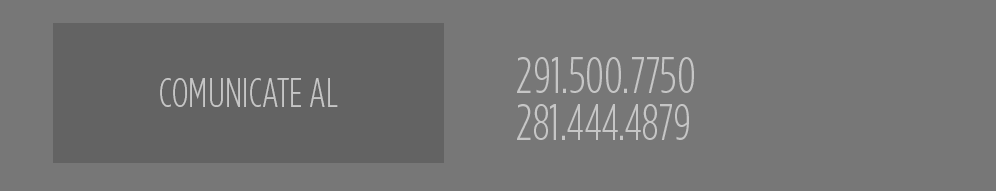
<style>
.page{position:relative;width:996px;height:191px;background:#777777}
.page>*{position:absolute;margin:0}
.t1{font:50.3px/47px "GothamCond-Light";color:#c6c6c6}
.t2{font:41px "GothamCond-Light";color:#c6c6c6}
</style>
<div class="page">
<p class="t1" style="left:517px;top:57px;width:177px;height:83px">291.500.7750<br>281.444.4879</p>
<p class="t2" style="left:160px;top:78px;width:178px;height:29px">COMUNICATE AL</p>
</div>
